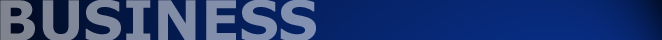
<style>
.page{position:relative;width:662px;height:40px}
.page>*{position:absolute;margin:0}
.t1{font:56px "Verdana-Bold";letter-spacing:-0.005em;color:#828ca5}
</style>
<div class="page">
<p class="t1" style="left:0px;top:0px;width:316px;height:42px">BUSINESS</p>
</div>
